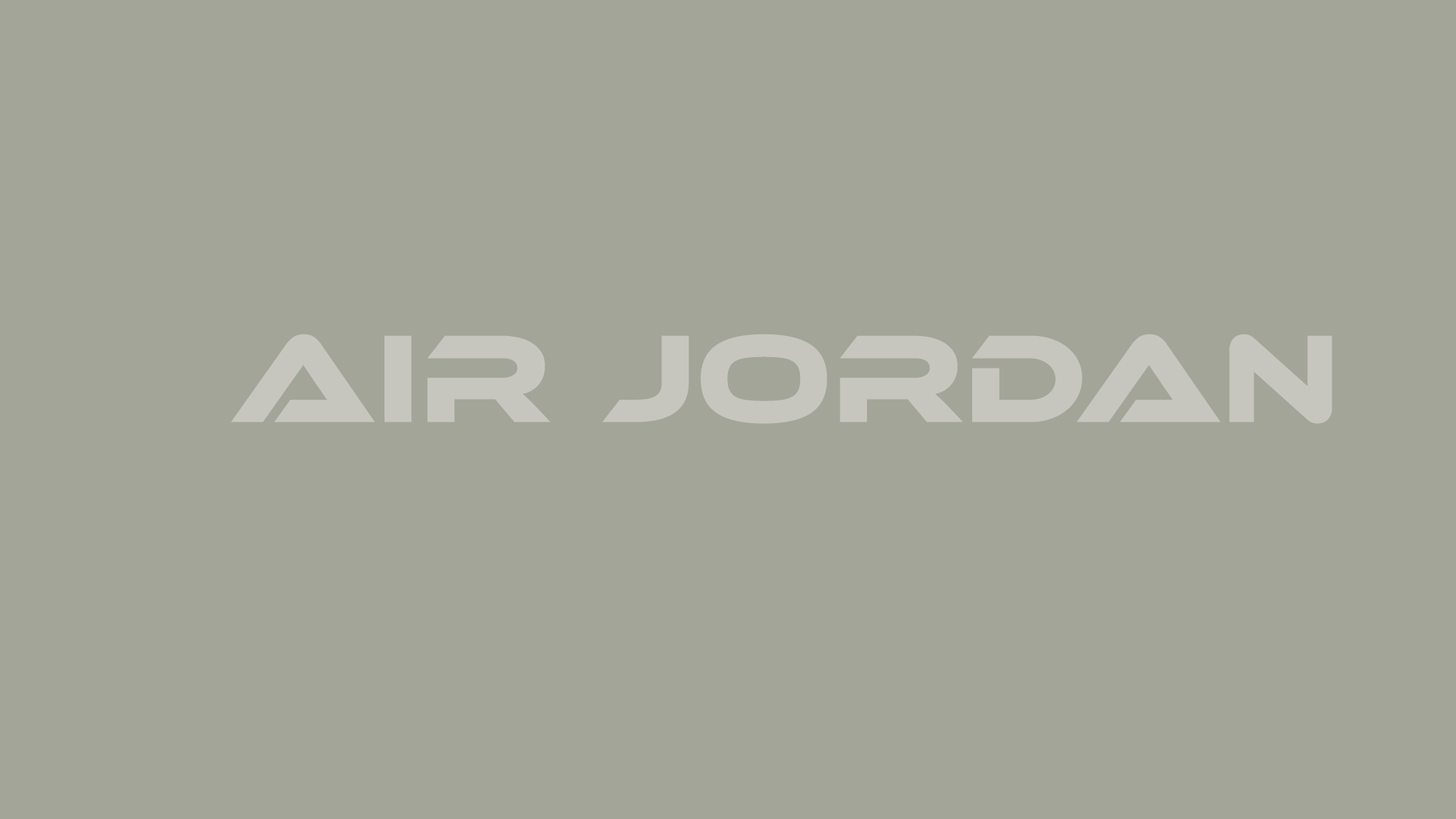
<style>
.page{position:relative;width:1456px;height:819px;background:#a4a599}
.page>*{position:absolute;margin:0}
.t1{font:128.9px "EthnocentricRg-Regular";color:#c6c6be}
</style>
<div class="page">
<p class="t1" style="left:231px;top:334px;width:1101px;height:90px">AIR JORDAN</p>
</div>
